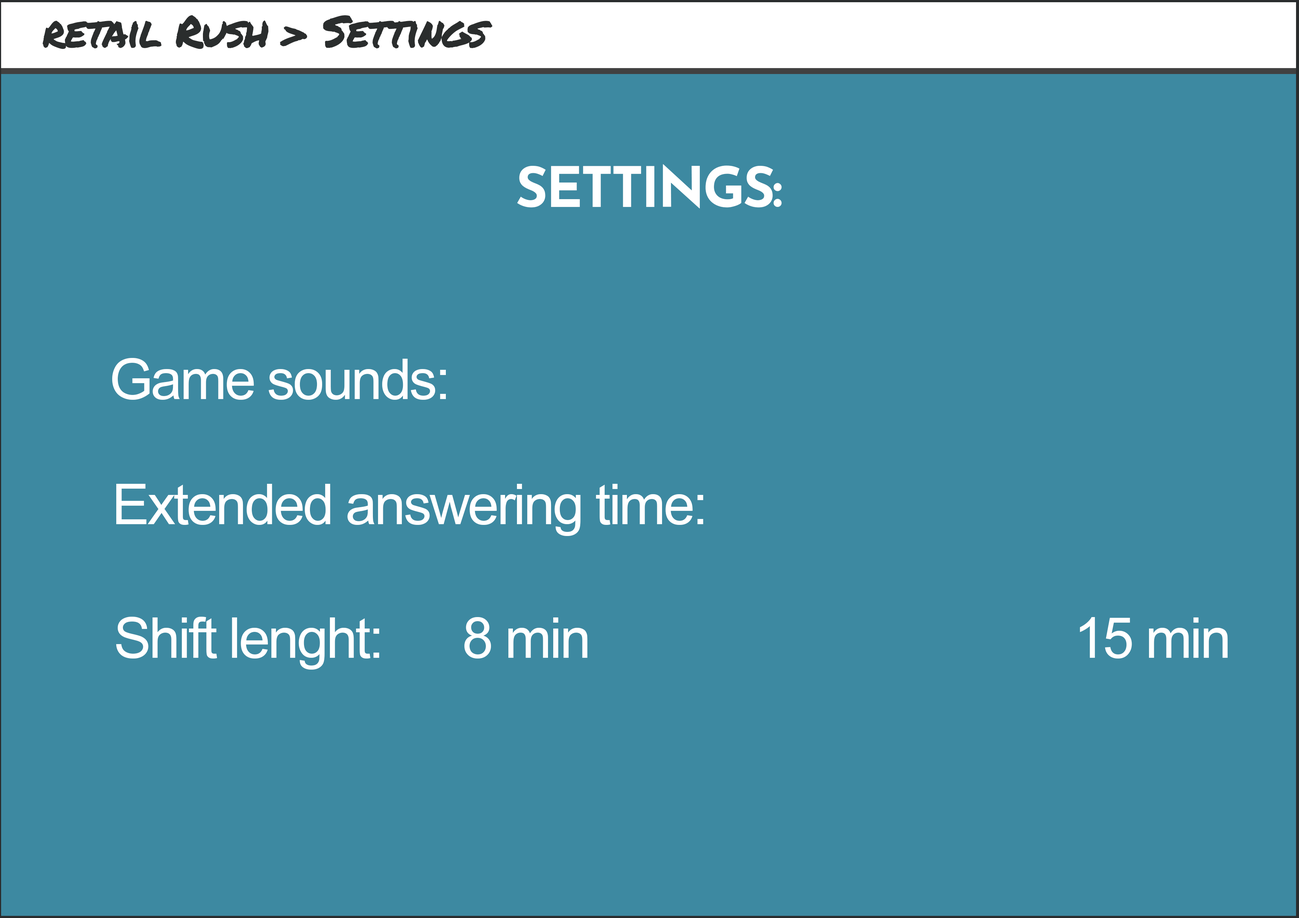
<style>
.page{position:relative;width:1299px;height:918px;background:#3d89a1}
.page>*{position:absolute;margin:0}
.t1{font:44px "PermanentMarker-Regular";letter-spacing:-0.04em;color:#2a2d2d}
.t2{font:55.5px "JosefinSans-Bold";letter-spacing:-0.04em;color:#ffffff}
.t3{font:56.3px "ArialMT";letter-spacing:-0.04em;color:#ffffff}
</style>
<div class="page">
<p class="t1" style="left:43px;top:15px;width:449px;height:34px">retail Rush &gt; Settings</p>
<p class="t2" style="left:517px;top:164px;width:265px;height:44px">SETTINGS:</p>
<p class="t3" style="left:112px;top:358px;width:334px;height:42px">Game sounds:</p>
<p class="t3" style="left:116px;top:484px;width:587px;height:52px">Extended answering time:</p>
<p class="t3" style="left:116px;top:617px;width:1112px;height:53px">Shift lenght:      8 min                                     15 min</p>
</div>
